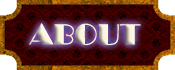
<style>
.page{position:relative;width:175px;height:70px}
.page>*{position:absolute;margin:0}
.t1{font:30px "Broadway";color:#fbf3db}
</style>
<div class="page">
<p class="t1" style="left:29px;top:23px;width:112px;height:23px">ABOUT</p>
</div>
